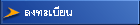
<style>
.page{position:relative;width:140px;height:25px}
.page>*{position:absolute;margin:0}
.t1{font:15.3px "EucrosiaDSE";color:#ffffff;scale:1.12 1}
</style>
<div class="page">
<p class="t1" style="left:25px;top:6px;width:47px;height:10px">Å§·ÐàºÕÂ¹</p>
</div>
